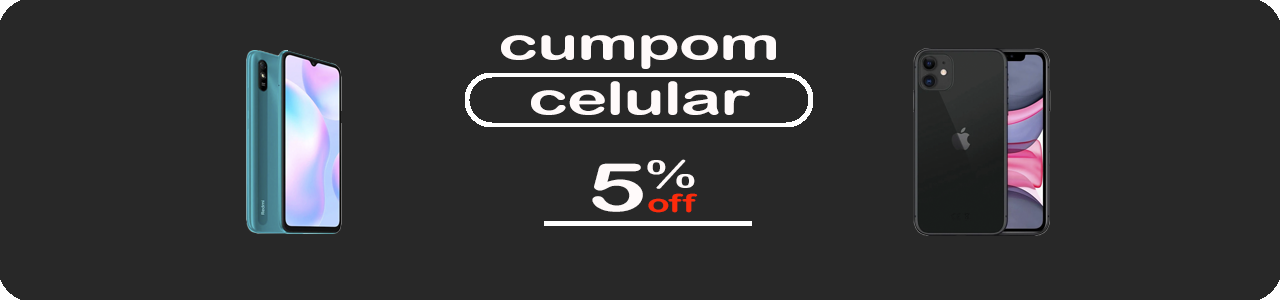
<style>
.page{position:relative;width:1280px;height:300px;background:#282828}
.page>*{position:absolute;margin:0}
.t1{font:45.8px "ArialRoundedMTBold";color:#fffafa;scale:1.5 1}
.t2{font:66.7px "ArialRoundedMTBold";color:#fffafa;scale:1.5 1}
.t3{font:25px "ArialRoundedMTBold";color:#fc2b0b;scale:1.5 1}
</style>
<div class="page">
<p class="t1" style="left:501px;top:35px;width:275px;height:80px;text-align:center">cumpom<br>celular</p>
<p class="t2" style="left:592px;top:159px;width:103px;height:53px">5%</p>
<p class="t3" style="left:648px;top:193px;width:50px;height:20px">off</p>
</div>
